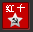
<style>
.page{position:relative;width:33px;height:32px;background:#c50000}
.page>*{position:absolute;margin:0}
.t1{font:10.4px "SimSun";color:#ffffff}
</style>
<div class="page">
<p class="t1" style="left:6px;top:4px;width:19px;height:8px">红十</p>
</div>
